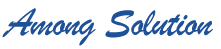
<style>
.page{position:relative;width:221px;height:49px;background:#ffffff}
.page>*{position:absolute;margin:0}
.t1{font:42px "BrushScriptMT";letter-spacing:-0.025em;color:#1e5197}
</style>
<div class="page">
<p class="t1" style="left:2px;top:8px;width:211px;height:38px">Among Solution</p>
</div>
